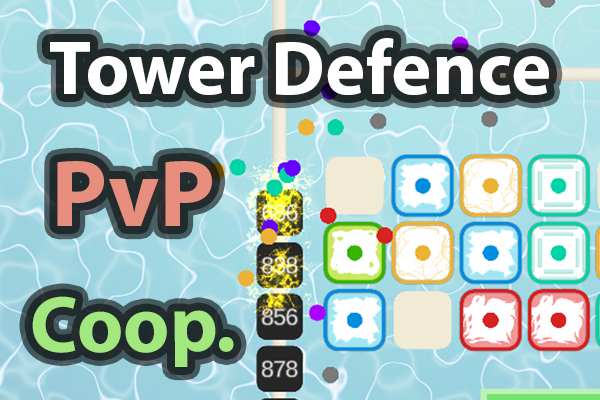
<style>
.page{position:relative;width:600px;height:400px}
.page>*{position:absolute;margin:0}
.t1{font:77.1px "MyriadPro-Bold";color:#ffffff}
.t2{font:96.7px "MyriadPro-Bold";color:#e88e7f}
.t3{font:80.6px "MyriadPro-Bold";color:#a2e87f}
</style>
<div class="page">
<p class="t1" style="left:50px;top:38px;width:499px;height:57px">Tower Defence</p>
<p class="t2" style="left:57px;top:161px;width:155px;height:65px">PvP</p>
<p class="t3" style="left:32px;top:296px;width:202px;height:71px">Coop.</p>
</div>
